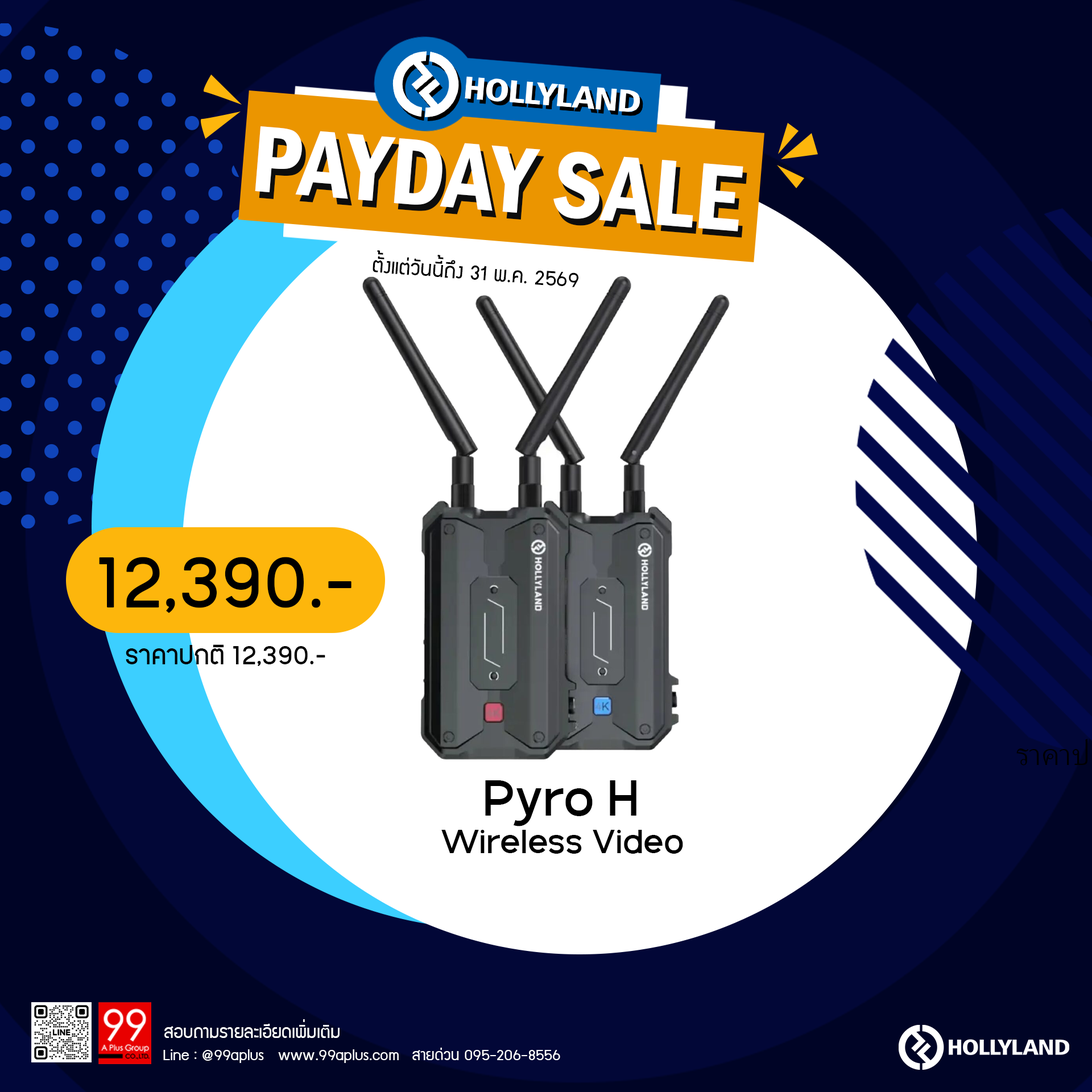
<style>
.page{position:relative;width:1092px;height:1092px;background:#ffffff}
.page>*{position:absolute;margin:0}
.t1{font:97.5px "FranklinGothic-DemiCond";color:#ffffff}
.t2{font:97.5px "FranklinGothic-DemiCond"}
.t3{font:23.2px "supermarket";color:#000000}
.t4{font:83.5px "PK-NakhonPathom-Demo";color:#000000}
.t5{font:30.3px "PK-NakhonPathom-Demo";color:#000000}
.t6{font:54px "GalakPro-Demo";color:#000000}
.t7{font:35.6px "GalakPro-Demo";color:#000000}
.t8{font:19.8px "supermarket";color:#ffffff}
.t9{font:17.2px "supermarket";color:#ffffff}
</style>
<div class="page">
<p class="t1" style="left:255px;top:126px;width:488px;height:105px;rotate:5deg">PAYDAY SALE</p>
<p class="t2" style="left:259px;top:133px;width:488px;height:105px;rotate:5deg">PAYDAY SALE</p>
<p class="t3" style="left:373px;top:250px;width:205px;height:37px;rotate:4deg">ตั้งแต่วันนี้ถึง 31 พ.ค. 2569</p>
<p class="t4" style="left:99px;top:557px;width:252px;height:56px">12,390.-</p>
<p class="t5" style="left:126px;top:644px;width:199px;height:22px">ราคาปกติ 12,390.-</p>
<p class="t6" style="left:485px;top:780px;width:151px;height:46px">Pyro H</p>
<p class="t7" style="left:441px;top:830px;width:242px;height:24px">Wireless Video</p>
<p class="t8" style="left:164px;top:1019px;width:176px;height:19px">สอบถามรายละเอียดเพิ่มเติม</p>
<p class="t9" style="left:163px;top:1049px;width:236px;height:14px">Line : @99aplus   www.99aplus.com</p>
<p class="t9" style="left:412px;top:1048px;width:148px;height:12px">สายด่วน 095-206-8556</p>
</div>
